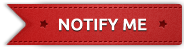
<style>
.page{position:relative;width:184px;height:49px}
.page>*{position:absolute;margin:0}
.t1{font:16.2px "Ubuntu-Medium";color:#fefefe;font-weight:bold}
</style>
<div class="page">
<p class="t1" style="left:59px;top:18px;width:88px;height:13px">NOTIFY ME</p>
</div>
